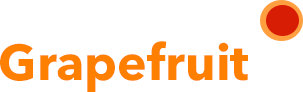
<style>
.page{position:relative;width:303px;height:92px;background:#ffffff}
.page>*{position:absolute;margin:0}
.t1{font:50px "AvenirNext-Bold";color:#ff7f00}
</style>
<div class="page">
<p class="t1" style="left:0px;top:41px;width:248px;height:51px">Grapefruit</p>
</div>
